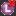
<style>
.page{position:relative;width:16px;height:16px;background:#333333}
.page>*{position:absolute;margin:0}
.t1{font:10px "Interstate-Black";color:#f0e5ee}
</style>
<div class="page">
<p class="t1" style="left:5px;top:4px;width:6px;height:8px">L</p>
</div>
